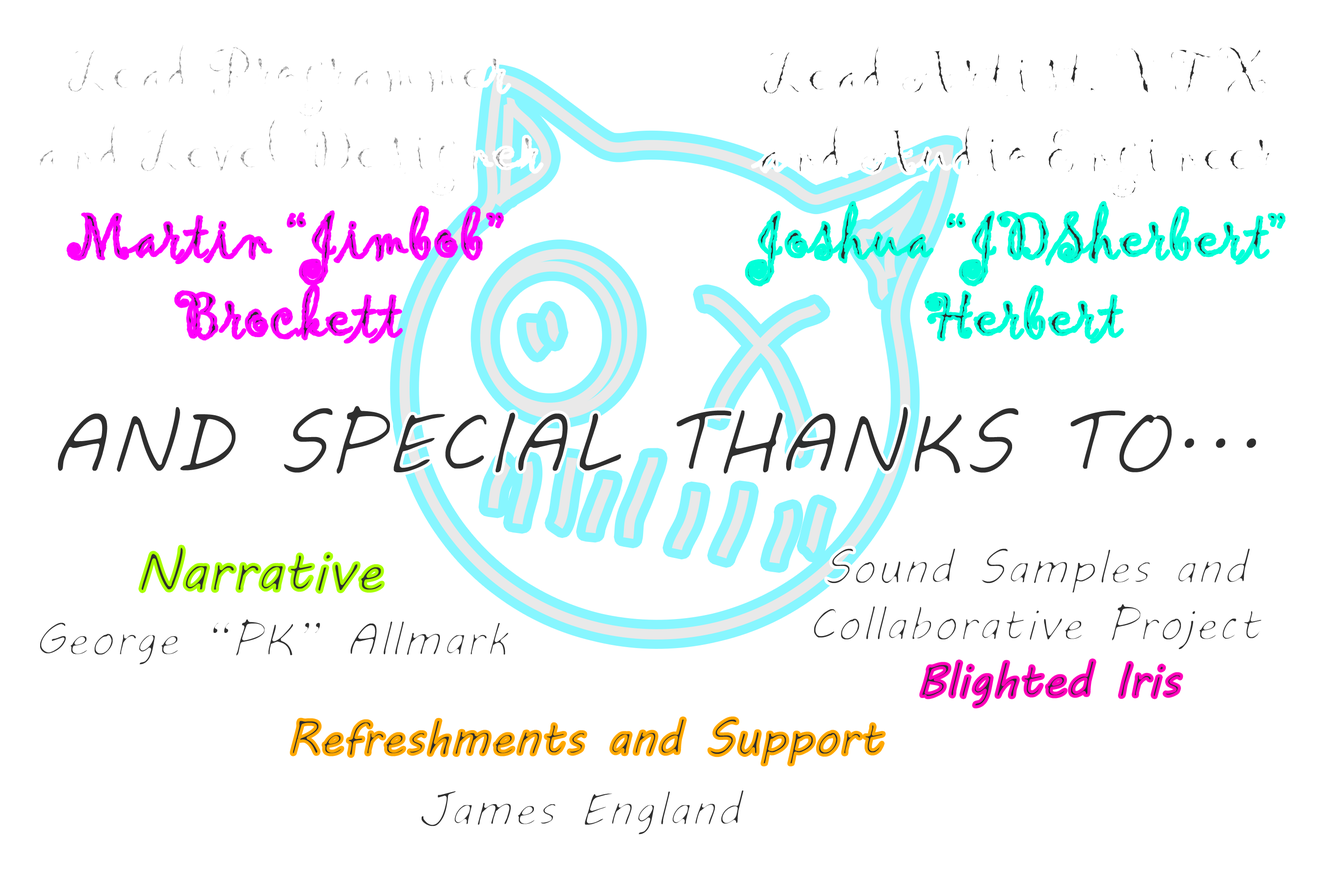
<style>
.page{position:relative;width:1337px;height:892px;background:#ffffff}
.page>*{position:absolute;margin:0}
.t1{font:66.1px "Gigi-Regular";color:#ffffff}
.t2{font:66.1px "Gigi-Regular";color:#ff00fc}
.t3{font:66.1px "Gigi-Regular";color:#00ffd8}
.t4{font:84.9px "MVBoli"}
.t5{font:56.6px "MVBoli"}
.t6{font:47.2px "MVBoli"}
</style>
<div class="page">
<p class="t1" style="left:753px;top:41px;width:524px;height:158px;text-align:center">Lead Artist, VFX  and Audio Engineer</p>
<p class="t2" style="left:68px;top:207px;width:434px;height:135px;text-align:center">Martin “Jimbob” Brockett</p>
<p class="t3" style="left:747px;top:202px;width:537px;height:140px;text-align:center">Joshua “JDSherbert” Herbert</p>
<p class="t4" style="left:56px;top:404px;width:1202px;height:71px;text-align:center">AND SPECIAL THANKS TO...<br>.</p>
<p class="t5" style="left:140px;top:546px;width:243px;height:46px">Narrative</p>
<p class="t6" style="left:813px;top:547px;width:450px;height:103px;text-align:center">Sound Samples and Collaborative Project</p>
<p class="t6" style="left:38px;top:617px;width:472px;height:49px">George “PK” Allmark</p>
<p class="t6" style="left:921px;top:660px;width:261px;height:47px">Blighted Iris</p>
<p class="t6" style="left:292px;top:718px;width:592px;height:47px">Refreshments and Support</p>
<p class="t6" style="left:420px;top:789px;width:325px;height:46px">James England</p>
</div>
